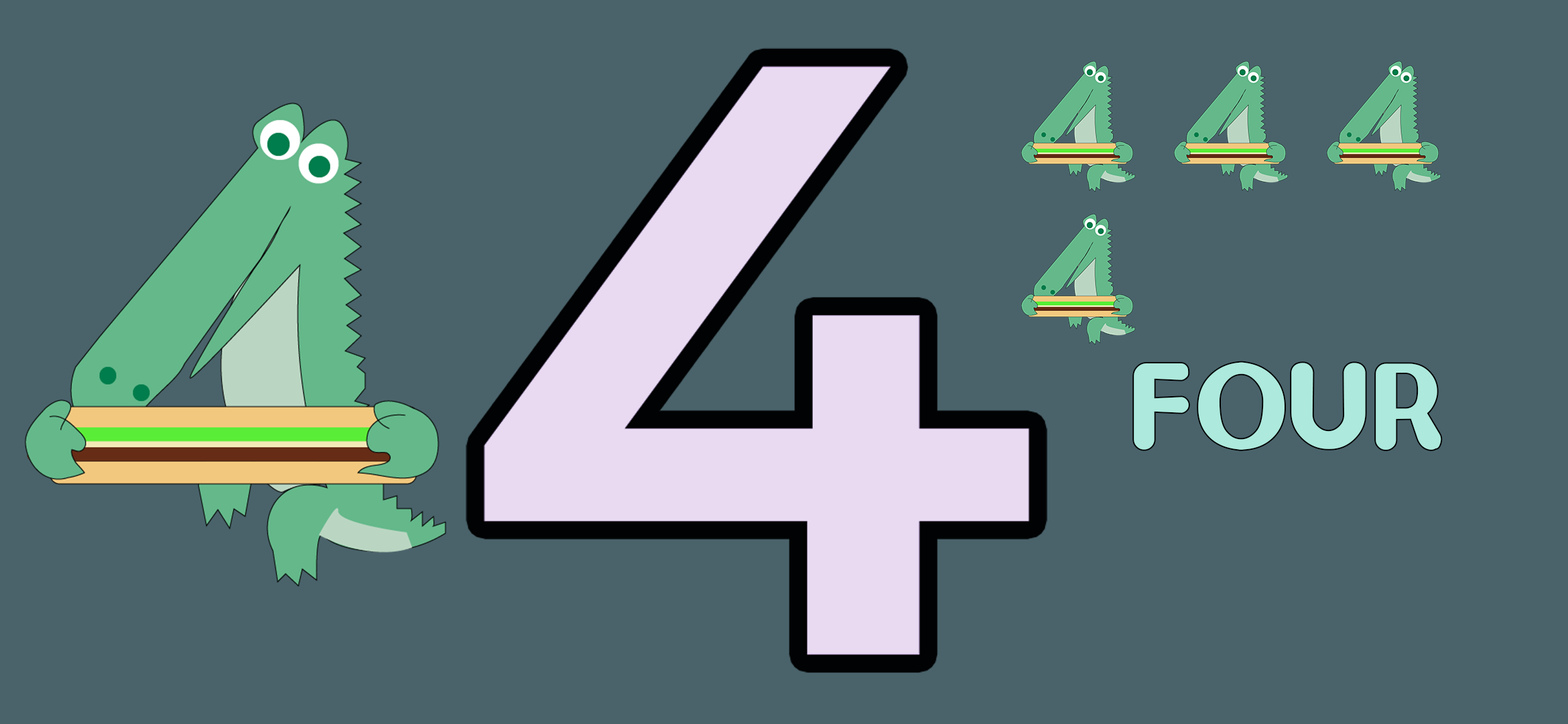
<style>
.page{position:relative;width:1568px;height:724px;background:#4a636b}
.page>*{position:absolute;margin:0}
.t1{font:139.6px "Dyuthi";color:#ade9dd}
</style>
<div class="page">
<p class="t1" style="left:1134px;top:362px;width:307px;height:88px">FOUR</p>
</div>
